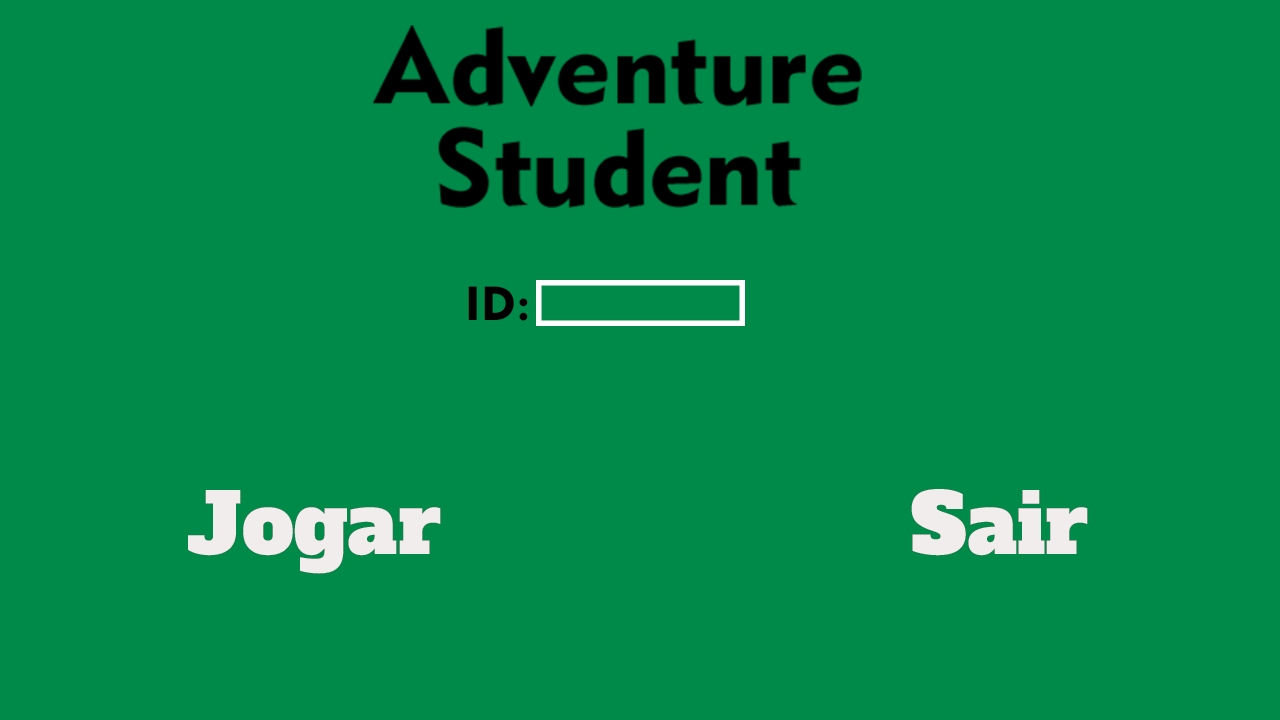
<style>
.page{position:relative;width:1280px;height:720px;background:#008a49}
.page>*{position:absolute;margin:0}
.t1{font:47.3px "Geometric415BT-BlackA";color:#000000}
.t2{font:82.1px "AlfaSlabOne-Regular";color:#f2eded}
</style>
<div class="page">
<p class="t1" style="left:468px;top:286px;width:60px;height:35px">ID:</p>
<p class="t2" style="left:188px;top:490px;width:253px;height:84px">Jogar</p>
<p class="t2" style="left:188px;top:490px;width:253px;height:84px">Jogar</p>
<p class="t2" style="left:911px;top:489px;width:177px;height:67px">Sair</p>
<p class="t2" style="left:911px;top:489px;width:177px;height:67px">Sair</p>
</div>
